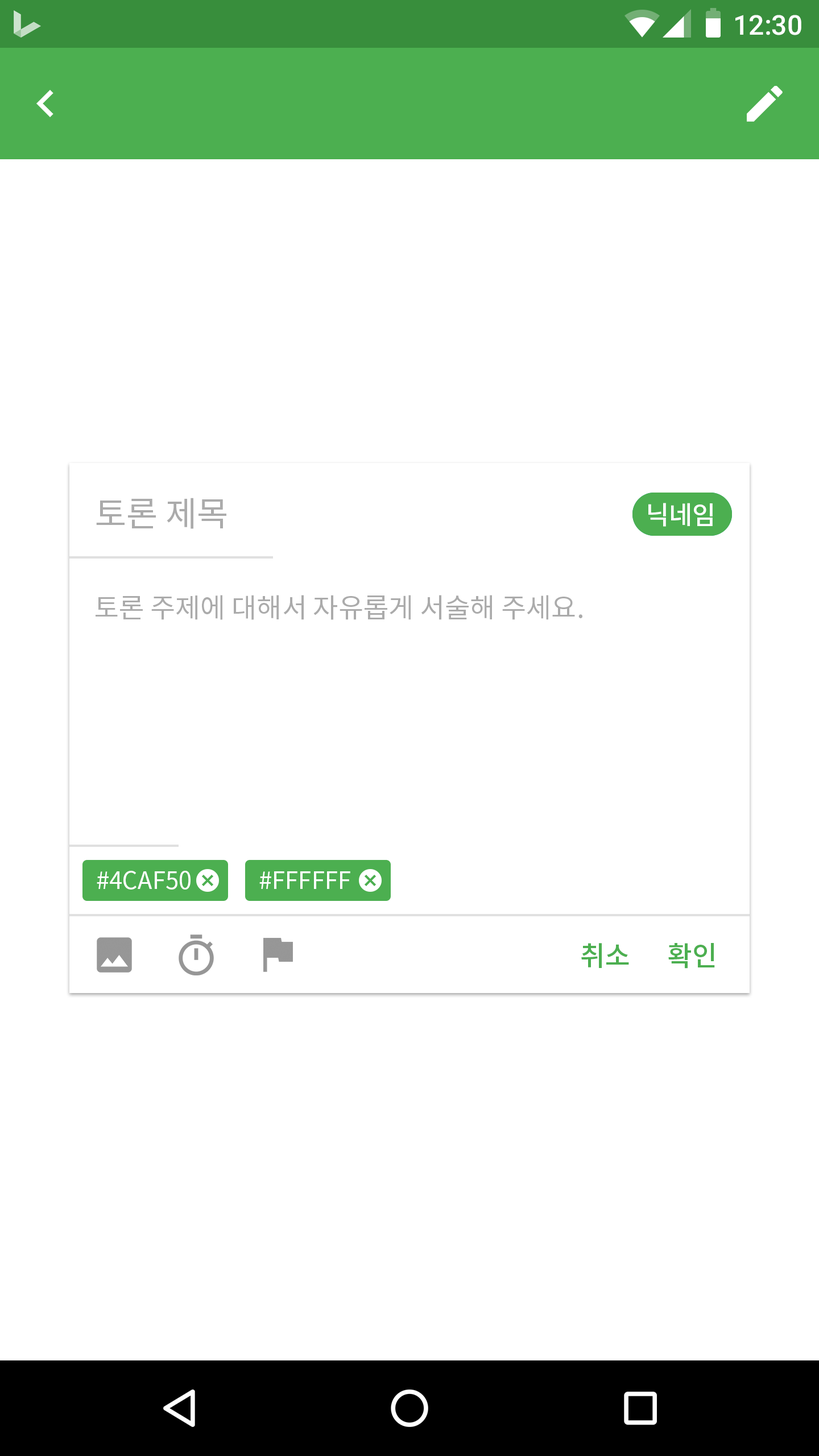
<style>
.page{position:relative;width:819px;height:1456px;background:#ffffff}
.page>*{position:absolute;margin:0}
.t1{font:27.3px "Roboto-Medium";color:#ffffff}
.t2{font:34.1px "NotoSansCJKkr-Regular";color:#ababab}
.t3{font:25.6px "NotoSansCJKkr-Medium";color:#ffffff}
.t4{font:27.3px "NotoSansCJKkr-Regular";color:#ababab}
.t5{font:23.9px "NotoSansCJKkr-Regular";color:#ffffff}
.t6{font:27.3px "NotoSansCJKkr-Medium";color:#4caf50}
</style>
<div class="page">
<p class="t1" style="left:735px;top:15px;width:66px;height:20px">12:30</p>
<p class="t2" style="left:96px;top:498px;width:130px;height:31px">토론 제목</p>
<p class="t3" style="left:648px;top:503px;width:65px;height:24px">닉네임</p>
<p class="t4" style="left:96px;top:595px;width:486px;height:25px">토론 주제에 대해서 자유롭게 서술해 주세요.</p>
<p class="t5" style="left:97px;top:871px;width:94px;height:19px">#4CAF50</p>
<p class="t5" style="left:259px;top:871px;width:91px;height:18px">#FFFFFF</p>
<p class="t6" style="left:581px;top:943px;width:48px;height:25px">취소</p>
<p class="t6" style="left:668px;top:943px;width:47px;height:26px">확인</p>
</div>
